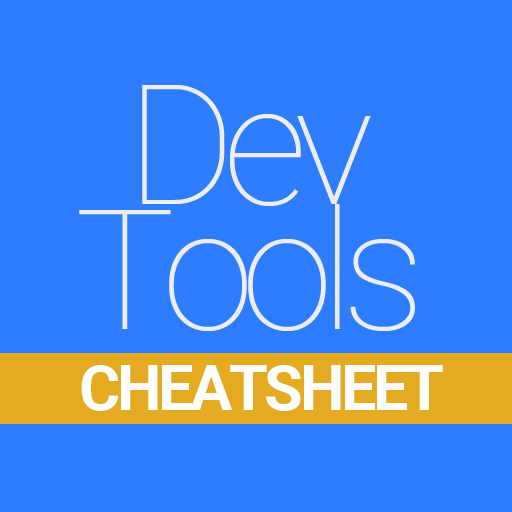
<style>
.page{position:relative;width:512px;height:512px;background:#2f7dff}
.page>*{position:absolute;margin:0}
.t1{font:166.7px/125px "Roboto-Thin";letter-spacing:-0.075em;color:#ededed}
.t2{font:62.5px "Roboto-Bold";letter-spacing:-0.05em;color:#ffffff}
</style>
<div class="page">
<p class="t1" style="left:79px;top:85px;width:336px;height:246px;text-align:center">Dev<br>Tools</p>
<p class="t2" style="left:81px;top:365px;width:362px;height:46px">CHEATSHEET</p>
</div>
